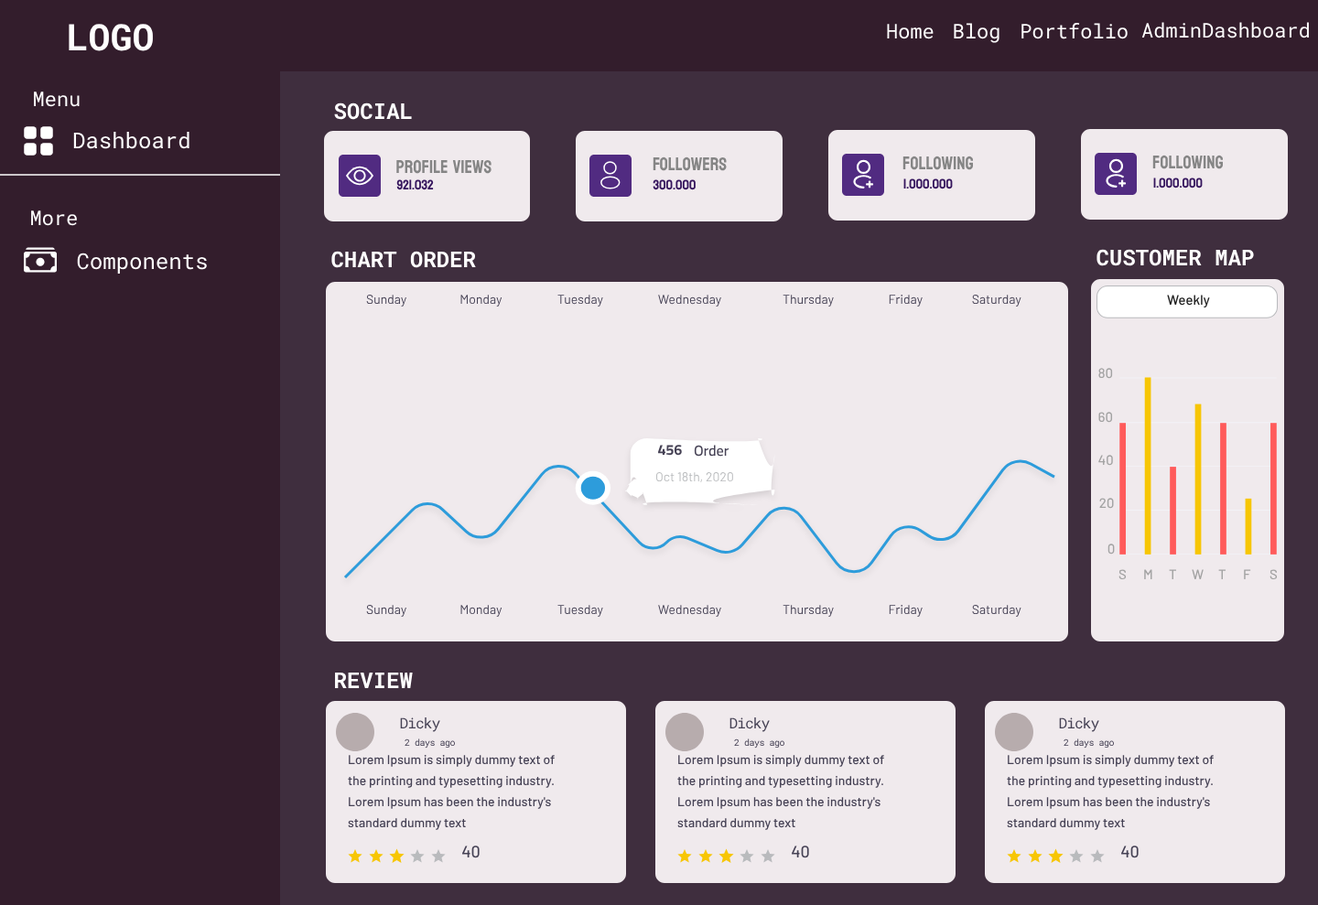
<style>
.page{position:relative;width:1318px;height:905px;background:#f0eaed}
.page>*{position:absolute;margin:0}
.t1{font:36.6px "RobotoMono-Bold";color:#ffffff}
.t2{font:20.1px "RobotoMono-Regular";color:#ffffff}
.t3{font:22px "RobotoMono-Bold";color:#ffffff}
.t4{font:22px "RobotoMono-Regular";color:#ffffff}
.t5{font:18.3px "Koulen-Regular";color:#858585}
.t6{font:13.7px "Koulen-Regular";color:#35155d}
.t7{font:12.8px "Barlow-Regular";color:#464255}
.t8{font:13.7px "Barlow-Medium";color:#202020}
.t9{font:13.7px "Barlow-Medium";color:#a3a3a3}
.t10{font:14.6px "Cairo-Bold";color:#464255}
.t11{font:14.6px "Cairo-SemiBold";color:#464255}
.t12{font:12.8px "Barlow-Regular";color:#b9bbbd}
.t13{font:14.6px "RobotoMono-Regular";letter-spacing:-0.05em;color:#464255}
.t14{font:9.2px "RobotoMono-Regular";letter-spacing:-0.05em;color:#464255}
.t15{font:12.8px/21px "Barlow-Medium";color:#464255}
.t16{font:16.5px "Barlow-Medium";color:#464255}
</style>
<div class="page">
<p class="t1" style="left:69px;top:24px;width:84px;height:27px">LOGO</p>
<p class="t2" style="left:887px;top:24px;width:46px;height:15px">Home</p>
<p class="t2" style="left:953px;top:23px;width:46px;height:20px">Blog</p>
<p class="t2" style="left:1021px;top:23px;width:106px;height:16px">Portfolio</p>
<p class="t2" style="left:1141px;top:22px;width:167px;height:16px">AdminDashboard</p>
<p class="t2" style="left:34px;top:92px;width:46px;height:15px">Menu</p>
<p class="t3" style="left:334px;top:102px;width:78px;height:18px">SOCIAL</p>
<p class="t4" style="left:73px;top:132px;width:116px;height:17px">Dashboard</p>
<p class="t5" style="left:396px;top:159px;width:95px;height:15px">profile views</p>
<p class="t5" style="left:652px;top:156px;width:75px;height:15px">Followers</p>
<p class="t5" style="left:902px;top:156px;width:71px;height:14px">following</p>
<p class="t5" style="left:1152px;top:155px;width:70px;height:14px">following</p>
<p class="t6" style="left:396px;top:179px;width:38px;height:11px">921.032</p>
<p class="t6" style="left:652px;top:179px;width:43px;height:11px">300.000</p>
<p class="t6" style="left:903px;top:178px;width:50px;height:11px">1.000.000</p>
<p class="t6" style="left:1153px;top:178px;width:49px;height:10px">1.000.000</p>
<p class="t2" style="left:31px;top:210px;width:46px;height:16px">More</p>
<p class="t4" style="left:77px;top:253px;width:130px;height:21px">Components</p>
<p class="t3" style="left:331px;top:251px;width:145px;height:17px">CHART ORDER</p>
<p class="t3" style="left:1096px;top:249px;width:158px;height:17px">CUSTOMER MAP</p>
<p class="t7" style="left:366px;top:295px;width:40px;height:12px">Sunday</p>
<p class="t7" style="left:460px;top:295px;width:42px;height:12px">Monday</p>
<p class="t7" style="left:557px;top:295px;width:46px;height:12px">Tuesday</p>
<p class="t7" style="left:658px;top:295px;width:63px;height:12px">Wednesday</p>
<p class="t7" style="left:782px;top:295px;width:52px;height:12px">Thursday</p>
<p class="t7" style="left:888px;top:295px;width:34px;height:12px">Friday</p>
<p class="t7" style="left:972px;top:295px;width:49px;height:12px">Saturday</p>
<p class="t8" style="left:1167px;top:295px;width:43px;height:12px">Weekly</p>
<p class="t9" style="left:1098px;top:368px;width:15px;height:11px">80</p>
<p class="t9" style="left:1098px;top:412px;width:15px;height:11px">60</p>
<p class="t10" style="left:658px;top:445px;width:24px;height:11px">456</p>
<p class="t11" style="left:694px;top:445px;width:35px;height:12px">Order</p>
<p class="t9" style="left:1098px;top:455px;width:15px;height:11px">40</p>
<p class="t12" style="left:656px;top:472px;width:77px;height:11px">Oct 18th, 2020</p>
<p class="t9" style="left:1099px;top:498px;width:15px;height:11px">20</p>
<p class="t9" style="left:1107px;top:544px;width:8px;height:11px">0</p>
<p class="t9" style="left:1118px;top:569px;width:8px;height:11px">S</p>
<p class="t9" style="left:1144px;top:569px;width:8px;height:10px">M</p>
<p class="t9" style="left:1168px;top:569px;width:9px;height:10px">T</p>
<p class="t9" style="left:1191px;top:569px;width:12px;height:10px">W</p>
<p class="t9" style="left:1218px;top:569px;width:8px;height:10px">T</p>
<p class="t9" style="left:1244px;top:569px;width:7px;height:10px">F</p>
<p class="t9" style="left:1269px;top:569px;width:8px;height:11px">S</p>
<p class="t7" style="left:366px;top:605px;width:40px;height:12px">Sunday</p>
<p class="t7" style="left:460px;top:605px;width:42px;height:12px">Monday</p>
<p class="t7" style="left:557px;top:605px;width:46px;height:12px">Tuesday</p>
<p class="t7" style="left:658px;top:605px;width:63px;height:12px">Wednesday</p>
<p class="t7" style="left:782px;top:605px;width:52px;height:12px">Thursday</p>
<p class="t7" style="left:888px;top:605px;width:34px;height:12px">Friday</p>
<p class="t7" style="left:972px;top:605px;width:49px;height:12px">Saturday</p>
<p class="t3" style="left:335px;top:672px;width:78px;height:16px">REVIEW</p>
<p class="t13" style="left:400px;top:717px;width:40px;height:15px">Dicky</p>
<p class="t13" style="left:729px;top:717px;width:41px;height:15px">Dicky</p>
<p class="t13" style="left:1059px;top:717px;width:40px;height:15px">Dicky</p>
<p class="t14" style="left:404px;top:738px;width:51px;height:10px">2 days ago</p>
<p class="t14" style="left:734px;top:738px;width:50px;height:10px">2 days ago</p>
<p class="t14" style="left:1063px;top:738px;width:51px;height:10px">2 days ago</p>
<p class="t15" style="left:348px;top:754px;width:207px;height:76px">Lorem Ipsum is simply dummy text of the printing and typesetting industry. Lorem Ipsum has been the industry's standard dummy text</p>
<p class="t15" style="left:677px;top:754px;width:207px;height:76px">Lorem Ipsum is simply dummy text of the printing and typesetting industry. Lorem Ipsum has been the industry's standard dummy text</p>
<p class="t15" style="left:1007px;top:754px;width:206px;height:76px">Lorem Ipsum is simply dummy text of the printing and typesetting industry. Lorem Ipsum has been the industry's standard dummy text</p>
<p class="t16" style="left:462px;top:845px;width:17px;height:13px">40</p>
<p class="t16" style="left:792px;top:845px;width:17px;height:13px">40</p>
<p class="t16" style="left:1121px;top:845px;width:17px;height:13px">40</p>
</div>
